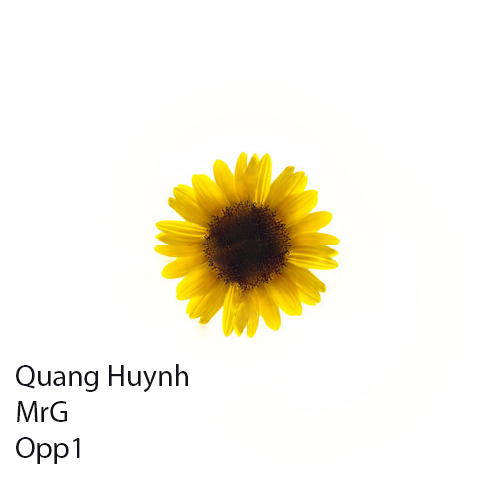
<style>
.page{position:relative;width:504px;height:504px;background:#ffffff}
.page>*{position:absolute;margin:0}
.t1{font:30px "MyriadPro-Regular";color:#15121b}
</style>
<div class="page">
<p class="t1" style="left:16px;top:364px;width:172px;height:100px">Quang Huynh<br>MrG<br>Opp1</p>
</div>
